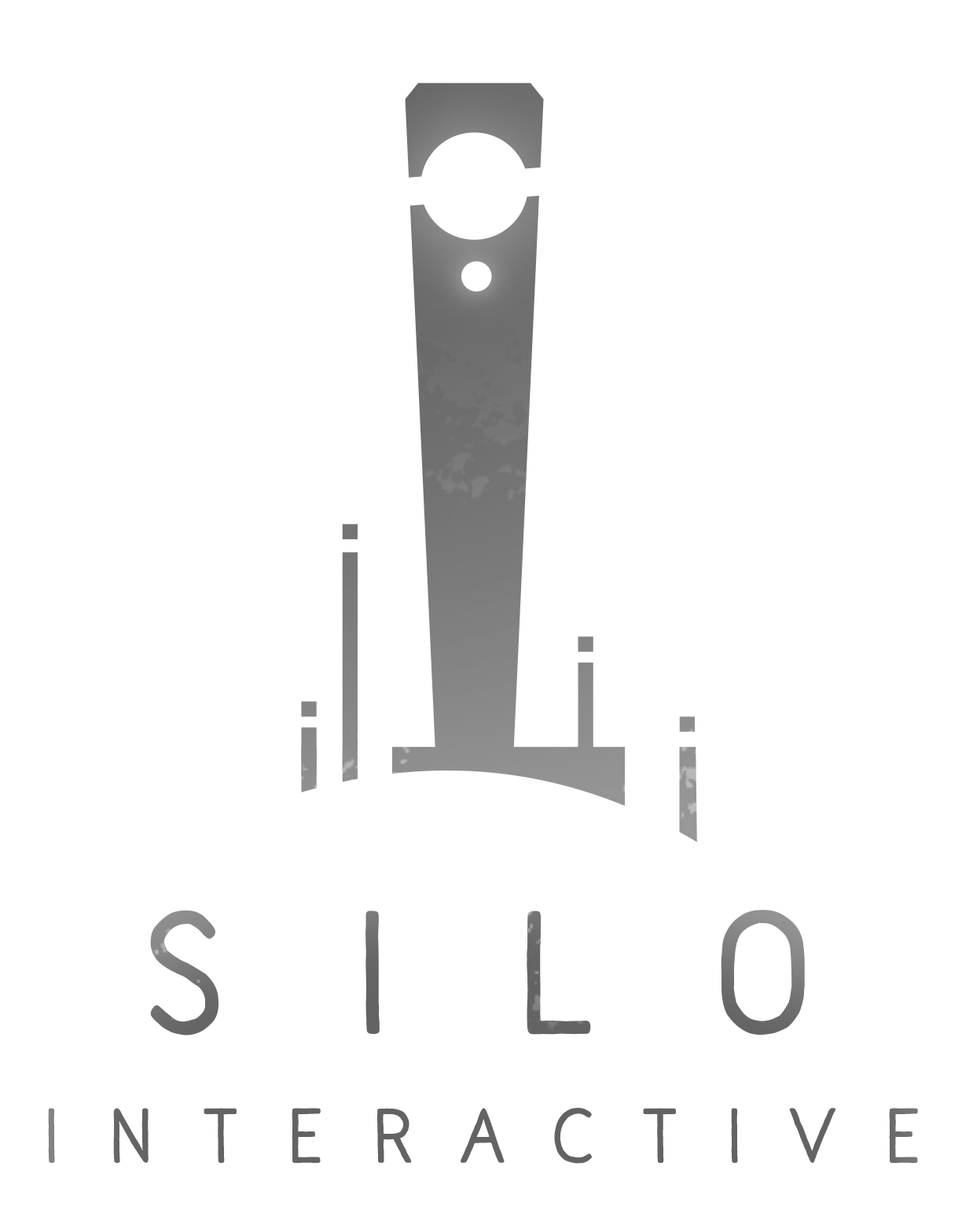
<style>
.page{position:relative;width:973px;height:1225px;background:#ffffff}
.page>*{position:absolute;margin:0}
.t1{font:164px "NaiveLineSansBlack";letter-spacing:0.7em;color:#636363}
.t2{font:72.7px "NaiveLineSansBlack";letter-spacing:0.6em;color:#636363}
</style>
<div class="page">
<p class="t1" style="left:150px;top:910px;width:655px;height:126px">silo</p>
<p class="t2" style="left:48px;top:1108px;width:870px;height:56px">interactive</p>
</div>
